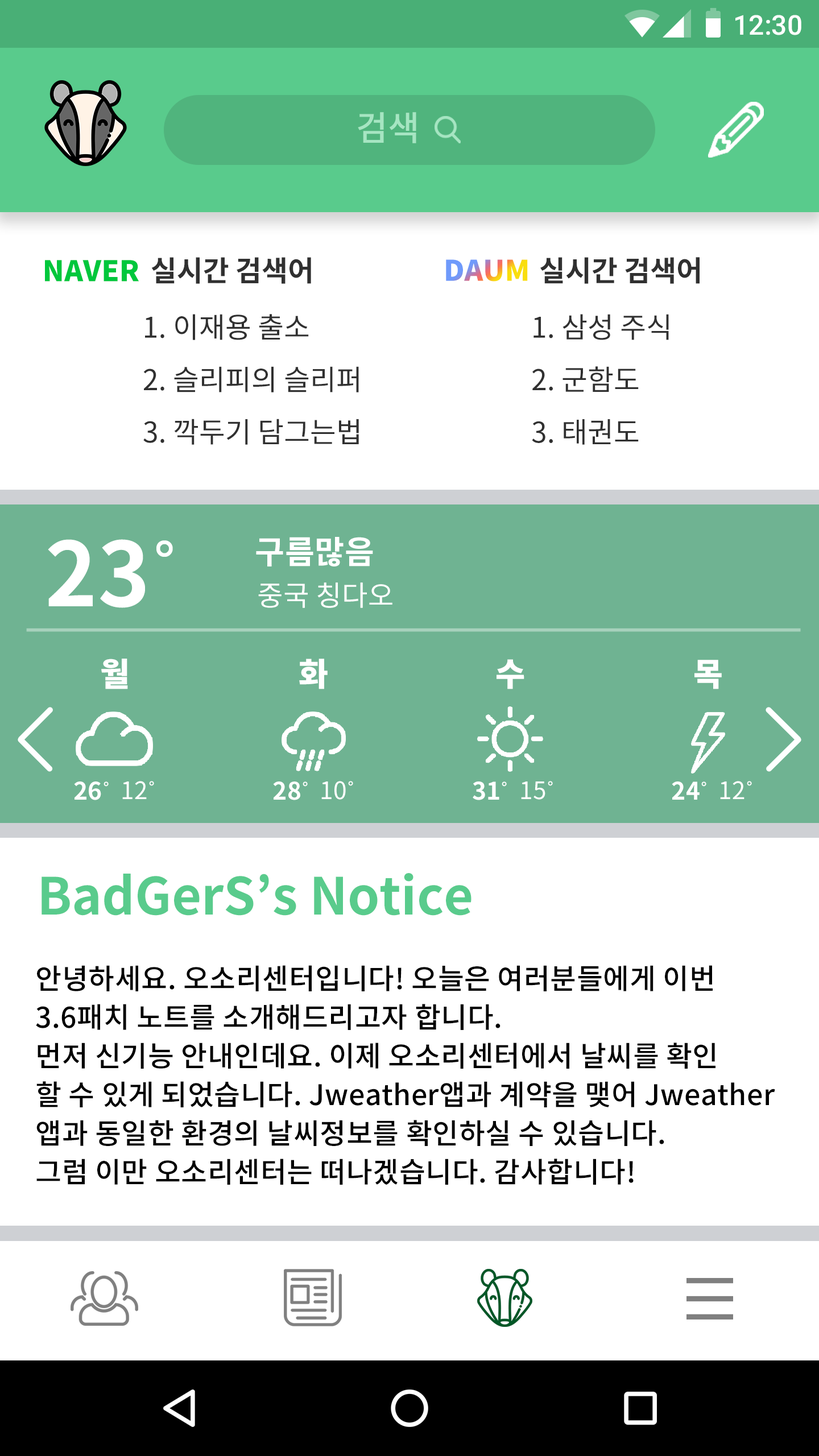
<style>
.page{position:relative;width:819px;height:1456px;background:#ffffff}
.page>*{position:absolute;margin:0}
.t1{font:27.3px "Roboto-Medium";color:#ffffff}
.t2{font:34.3px "NotoSansCJKkr-Medium";color:#a6e5c2}
.t3{font:28.5px "NotoSansCJKkr-Bold";color:#303030}
.t4{font:28.5px "NotoSansCJKkr-Black";color:#00c73c}
.t5{font:28.5px "NotoSansCJKkr-Black"}
.t6{font:28.5px "NotoSansCJKkr-Regular";color:#303030}
.t7{font:88.5px "NotoSansCJKkr-Bold";letter-spacing:0.01em;color:#ffffff}
.t8{font:88.5px "Gulim";letter-spacing:0.01em;color:#ffffff}
.t9{font:32.2px "NotoSansCJKkr-Bold";letter-spacing:0.01em;color:#ffffff}
.t10{font:28.1px "NotoSansCJKkr-Regular";letter-spacing:0.01em;color:#ffffff}
.t11{font:32.2px "NotoSansCJKkr-Black";letter-spacing:0.01em;color:#ffffff}
.t12{font:24.1px "NotoSansCJKkr-Bold";letter-spacing:0.01em;color:#ffffff}
.t13{font:24.1px "Gulim";letter-spacing:0.01em;color:#ffffff}
.t14{font:24.1px "NotoSansCJKkr-Regular";letter-spacing:0.01em;color:#ffffff}
.t15{font:51.2px "NotoSansCJKkr-Bold";color:#59cb8c}
.t16{font:28.4px/38.7px "NotoSansCJKkr-Medium";letter-spacing:0.01em;color:#000000}
</style>
<div class="page">
<p class="t1" style="left:735px;top:15px;width:66px;height:20px">12:30</p>
<p class="t2" style="left:358px;top:112px;width:58px;height:31px">검색</p>
<p class="t3" style="left:151px;top:257px;width:160px;height:27px">실시간 검색어</p>
<p class="t3" style="left:540px;top:257px;width:160px;height:27px">실시간 검색어</p>
<p class="t4" style="left:45px;top:260px;width:94px;height:22px">NAVER</p>
<p class="t5" style="left:446px;top:259px;width:82px;height:23px">DAUM</p>
<p class="t6" style="left:145px;top:314px;width:164px;height:26px">1. 이재용 출소</p>
<p class="t6" style="left:533px;top:314px;width:136px;height:26px">1. 삼성 주식</p>
<p class="t6" style="left:143px;top:366px;width:216px;height:26px">2. 슬리피의 슬리퍼</p>
<p class="t6" style="left:532px;top:366px;width:107px;height:26px">2. 군함도</p>
<p class="t6" style="left:143px;top:419px;width:216px;height:26px">3. 깍두기 담그는법</p>
<p class="t6" style="left:532px;top:419px;width:107px;height:26px">3. 태권도</p>
<p class="t7" style="left:48px;top:539px;width:125px;height:69px">23<span class="t8">˚</span></p>
<p class="t9" style="left:256px;top:537px;width:117px;height:29px">구름많음</p>
<p class="t10" style="left:258px;top:582px;width:134px;height:26px">중국 칭다오</p>
<p class="t11" style="left:101px;top:659px;width:27px;height:30px">월</p>
<p class="t11" style="left:299px;top:659px;width:29px;height:30px">화</p>
<p class="t11" style="left:497px;top:659px;width:27px;height:30px">수</p>
<p class="t11" style="left:694px;top:660px;width:28px;height:29px">목</p>
<p class="t12" style="left:74px;top:781px;width:35px;height:19px">26<span class="t13">˚</span></p>
<p class="t14" style="left:122px;top:781px;width:32px;height:18px">12<span class="t13">˚</span></p>
<p class="t12" style="left:273px;top:781px;width:35px;height:19px">28<span class="t13">˚</span></p>
<p class="t14" style="left:321px;top:781px;width:32px;height:19px">10<span class="t13">˚</span></p>
<p class="t12" style="left:473px;top:781px;width:34px;height:19px">31<span class="t13">˚</span></p>
<p class="t14" style="left:521px;top:781px;width:32px;height:19px">15<span class="t13">˚</span></p>
<p class="t12" style="left:672px;top:781px;width:34px;height:19px">24<span class="t13">˚</span></p>
<p class="t14" style="left:720px;top:781px;width:32px;height:18px">12<span class="t13">˚</span></p>
<p class="t15" style="left:42px;top:873px;width:429px;height:43px">BadGerS’s Notice</p>
<p class="t16" style="left:36px;top:965px;width:739px;height:220px">안녕하세요. 오소리센터입니다! 오늘은 여러분들에게 이번<br>3.6패치 노트를 소개해드리고자 합니다.<br>먼저 신기능 안내인데요. 이제 오소리센터에서 날씨를 확인<br>할 수 있게 되었습니다. Jweather앱과 계약을 맺어 Jweather<br>앱과 동일한 환경의 날씨정보를 확인하실 수 있습니다.<br>그럼 이만 오소리센터는 떠나겠습니다. 감사합니다!</p>
</div>
